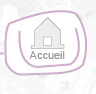
<style>
.page{position:relative;width:96px;height:94px;background:#ffffff}
.page>*{position:absolute;margin:0}
.t1{font:11px "ArialMT";color:#959595}
</style>
<div class="page">
<p class="t1" style="left:29px;top:51px;width:36px;height:8px">Accueil</p>
</div>
